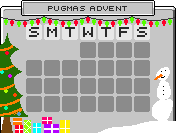
<style>
.page{position:relative;width:176px;height:133px;background:#c6c6c6}
.page>*{position:absolute;margin:0}
.t1{font:7px "RetroComputer";letter-spacing:0.04em;color:#2b2b2b}
.t2{font:14px "RetroComputer";letter-spacing:0.04em;color:#2b2b2b}
</style>
<div class="page">
<p class="t1" style="left:48px;top:6px;width:79px;height:5px">pugmas  advent</p>
<p class="t1" style="left:48px;top:6px;width:79px;height:5px">pugmas  advent</p>
<p class="t2" style="left:29px;top:27px;width:10px;height:10px">s</p>
<p class="t2" style="left:29px;top:27px;width:10px;height:10px">s</p>
<p class="t2" style="left:47px;top:27px;width:10px;height:10px">M</p>
<p class="t2" style="left:47px;top:27px;width:10px;height:10px">M</p>
<p class="t2" style="left:65px;top:27px;width:10px;height:10px">T</p>
<p class="t2" style="left:65px;top:27px;width:10px;height:10px">T</p>
<p class="t2" style="left:83px;top:27px;width:10px;height:10px">W</p>
<p class="t2" style="left:83px;top:27px;width:10px;height:10px">W</p>
<p class="t2" style="left:101px;top:27px;width:10px;height:10px">T</p>
<p class="t2" style="left:101px;top:27px;width:10px;height:10px">T</p>
<p class="t2" style="left:119px;top:27px;width:10px;height:10px">f</p>
<p class="t2" style="left:119px;top:27px;width:10px;height:10px">f</p>
<p class="t2" style="left:137px;top:27px;width:10px;height:10px">s</p>
<p class="t2" style="left:137px;top:27px;width:10px;height:10px">s</p>
</div>
